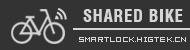
<style>
.page{position:relative;width:190px;height:50px;background:#333333}
.page>*{position:absolute;margin:0}
.t1{font:17px "Swiss721BT-BlackCondensed";letter-spacing:0.03em;color:#d5d6d6}
.t2{font:8px "04b08";letter-spacing:0.03em;color:#d5d6d6}
</style>
<div class="page">
<p class="t1" style="left:83px;top:9px;width:100px;height:13px">SHARED BIKE</p>
<p class="t2" style="left:79px;top:37px;width:107px;height:5px">smartlock.higtek.cn</p>
</div>
